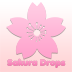
<style>
.page{position:relative;width:72px;height:72px}
.page>*{position:absolute;margin:0}
.t1{font:8.6px "Debussy";color:#fb92c1}
</style>
<div class="page">
<p class="t1" style="left:7px;top:58px;width:59px;height:10px">Sakura Drops</p>
</div>
